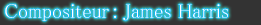
<style>
.page{position:relative;width:261px;height:25px;background:#333333}
.page>*{position:absolute;margin:0}
.t1{font:20px "MS-PMincho";color:#ffffff}
.t2{font:20px "MS-PMincho";letter-spacing:-0.05em;color:#ffffff}
</style>
<div class="page">
<p class="t1" style="left:5px;top:4px;width:223px;height:17px">Compositeur <span class="t2">:</span> James Harris</p>
</div>
